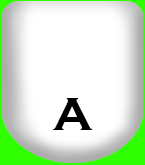
<style>
.page{position:relative;width:145px;height:165px;background:#ffffff}
.page>*{position:absolute;margin:0}
.t1{font:48px "CopperplateGothic-Bold";color:#000000}
</style>
<div class="page">
<p class="t1" style="left:53px;top:98px;width:40px;height:32px">A</p>
</div>
